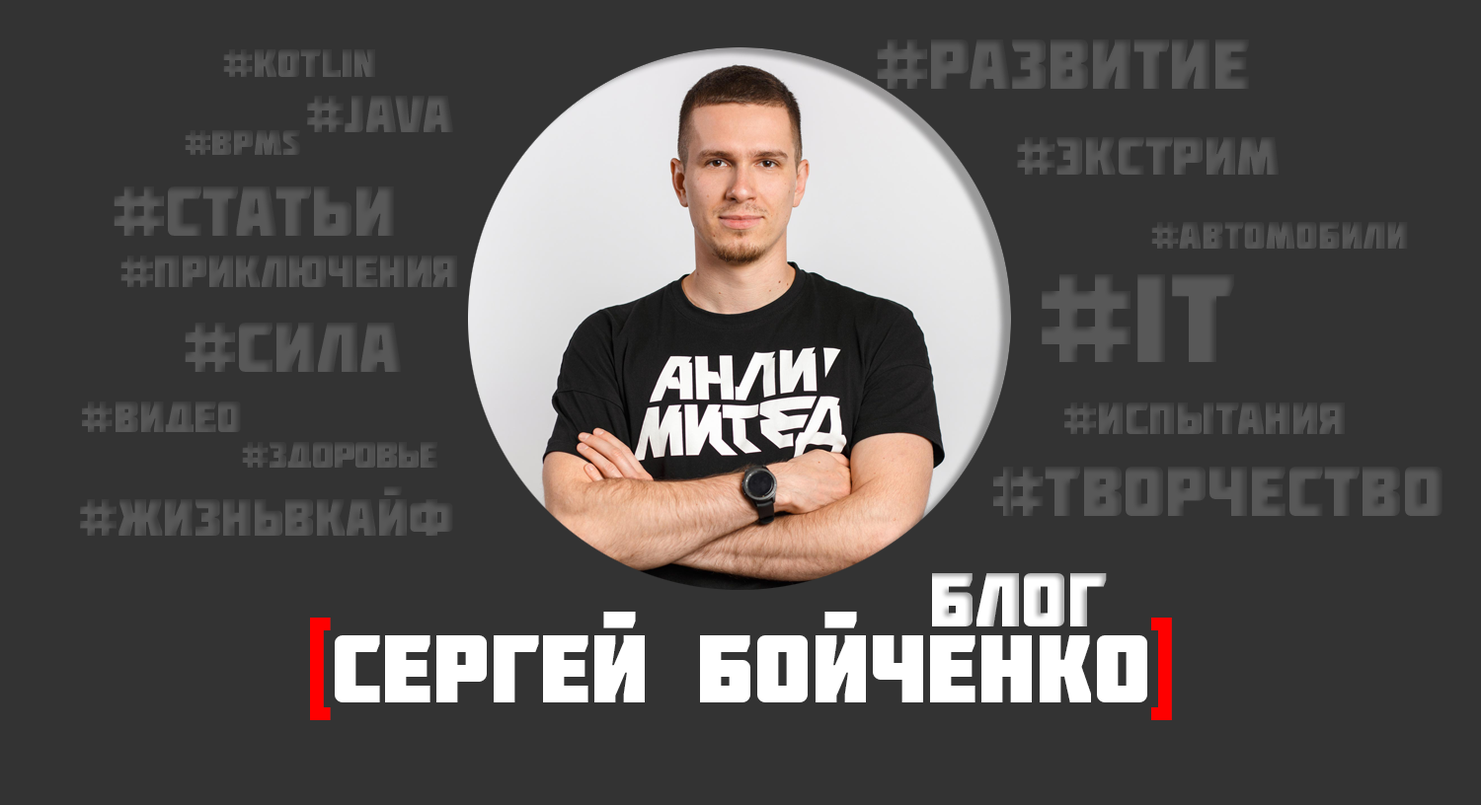
<style>
.page{position:relative;width:1481px;height:805px;background:#333333}
.page>*{position:absolute;margin:0}
.t1{font:71.1px "Molot";color:#565656}
.t2{font:40px "Molot";color:#565656}
.t3{font:52.2px "Molot";color:#565656}
.t4{font:35.7px "Molot";color:#565656}
.t5{font:53.9px "Molot";color:#565656}
.t6{font:37.5px "Molot";color:#565656}
.t7{font:44.9px "Molot";color:#565656}
.t8{font:126.1px "Molot";color:#565656}
.t9{font:43.2px "Molot";color:#565656}
.t10{font:45.5px "Molot";color:#565656}
.t11{font:36px "Molot";color:#565656}
.t12{font:70.5px "Molot";color:#565656}
.t13{font:52px "Molot";color:#565656}
.t14{font:76.8px "Molot";color:#ffffff}
.t15{font:96.2px "Molot";color:#ffffff}
.t16{font:96.2px "Molot";color:#ff0000}
.t17{font:96.2px "Molot";color:#fe0000}
</style>
<div class="page">
<p class="t1" style="left:876px;top:39px;width:373px;height:50px">#развитие</p>
<p class="t2" style="left:223px;top:49px;width:152px;height:28px">#kotlin</p>
<p class="t3" style="left:307px;top:96px;width:146px;height:36px">#java</p>
<p class="t4" style="left:185px;top:130px;width:115px;height:25px">#BPMS</p>
<p class="t5" style="left:1017px;top:137px;width:261px;height:38px">#экстрим</p>
<p class="t1" style="left:114px;top:187px;width:280px;height:49px">#Статьи</p>
<p class="t6" style="left:1151px;top:222px;width:256px;height:27px">#Автомобили</p>
<p class="t7" style="left:120px;top:256px;width:337px;height:31px">#Приключения</p>
<p class="t8" style="left:1041px;top:274px;width:193px;height:88px">#IT</p>
<p class="t1" style="left:185px;top:323px;width:216px;height:49px">#Сила</p>
<p class="t9" style="left:82px;top:402px;width:159px;height:30px">#ВИДЕО</p>
<p class="t10" style="left:1064px;top:403px;width:280px;height:31px">#испытания</p>
<p class="t11" style="left:242px;top:442px;width:195px;height:26px">#Здоровье</p>
<p class="t12" style="left:993px;top:467px;width:449px;height:49px">#Творчество</p>
<p class="t13" style="left:80px;top:487px;width:373px;height:49px">#ЖИзньвкайф</p>
<p class="t14" style="left:932px;top:573px;width:174px;height:54px">Блог</p>
<p class="t15" style="left:310px;top:612px;width:862px;height:109px"><span class="t16">[</span>Сергей Бойченко<span class="t17">]</span></p>
</div>
